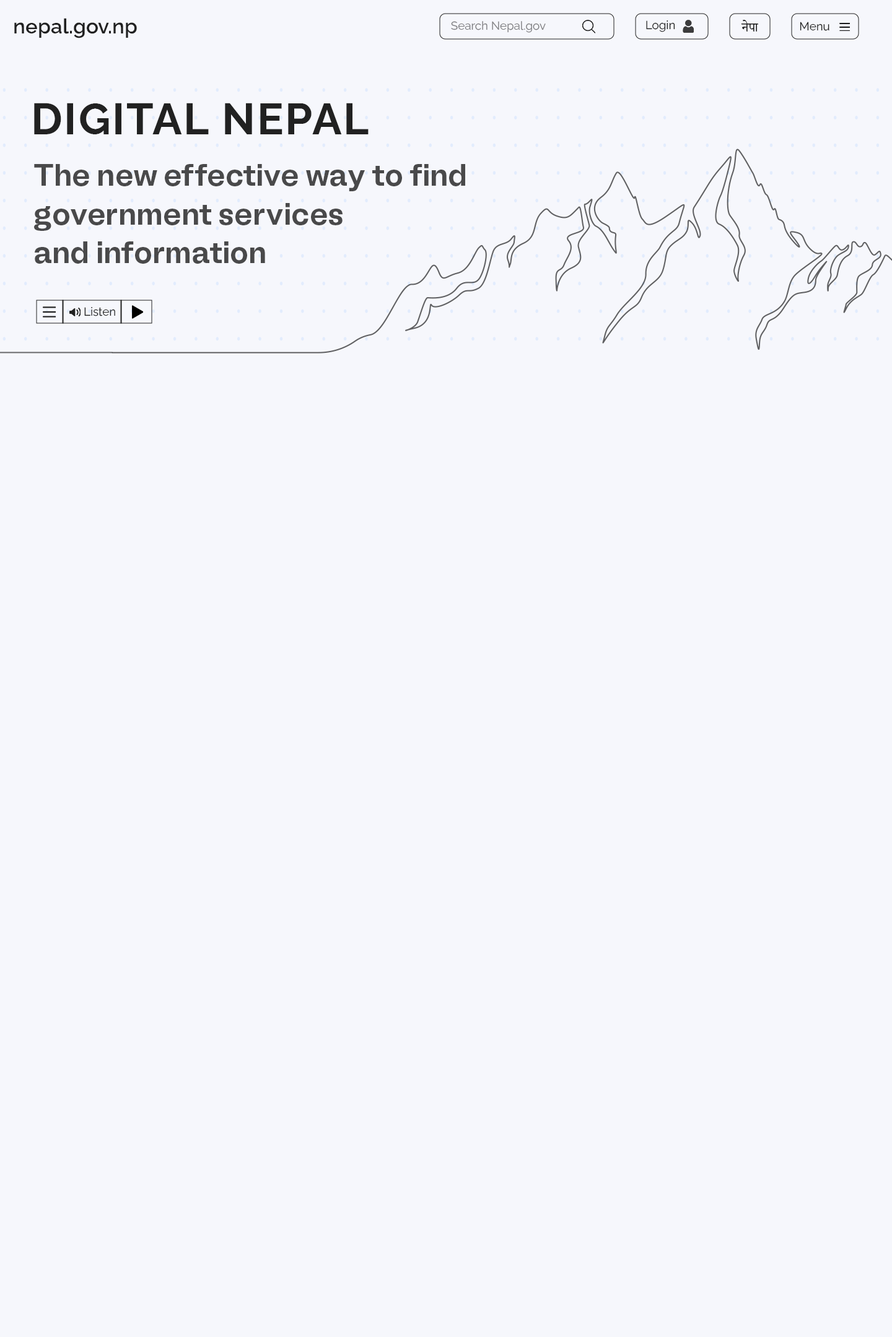
<style>
.page{position:relative;width:892px;height:1337px;background:#f6f7fc}
.page>*{position:absolute;margin:0}
.t1{font:20.6px "Raleway-SemiBold";color:#212121}
.t2{font:11.6px "Raleway-Regular";color:#7c7c7f}
.t3{font:11.6px "Raleway-Regular";color:#212121}
.t4{font:15.5px "AdobeDevanagari-Regular";color:#212121}
.t5{font:43.9px "Raleway-Bold";letter-spacing:0.04em;color:#212121}
.t6{font:31px/38.7px "BLMelody-SemiBold";color:#49494a}
</style>
<div class="page">
<p class="t1" style="left:14px;top:18px;width:123px;height:20px">nepal.gov.np</p>
<p class="t2" style="left:451px;top:21px;width:94px;height:12px">Search Nepal.gov</p>
<p class="t3" style="left:646px;top:20px;width:29px;height:12px">Login</p>
<p class="t4" style="left:741px;top:20px;width:17px;height:12px">नेपा</p>
<p class="t3" style="left:799px;top:22px;width:30px;height:9px">Menu</p>
<p class="t5" style="left:34px;top:103px;width:334px;height:31px">DIGITAL NEPAL</p>
<p class="t6" style="left:34px;top:164px;width:431px;height:100px">The new effective way to find<br>government services <br>and information</p>
<p class="t3" style="left:84px;top:307px;width:31px;height:9px">Listen</p>
</div>
